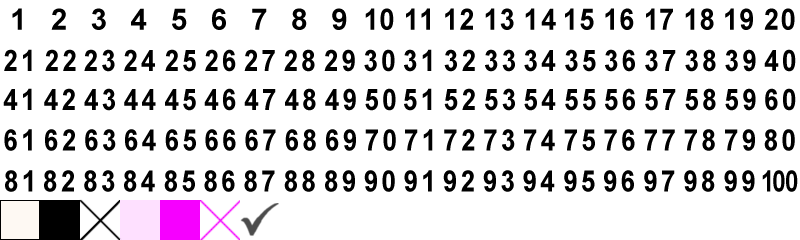
<style>
.page{position:relative;width:800px;height:240px;background:#ffffff}
.page>*{position:absolute;margin:0}
.t1{font:29.6px "Arial-BoldMT";letter-spacing:0.8em;color:#000000}
.t2{font:29.5px "Arial-BoldMT";letter-spacing:0.12em;color:#000000;scale:0.91 1}
.t3{font:29.5px "Arial-BoldMT";letter-spacing:0.12em;color:#000000;scale:0.89 1}
.t4{font:29.5px "Arial-BoldMT";letter-spacing:0.12em;color:#000000;scale:0.81 1}
.t5{font:29.5px "Arial-BoldMT";letter-spacing:-0.14em;color:#000000;scale:0.81 1}
</style>
<div class="page">
<p class="t1" style="left:12px;top:8px;width:335px;height:22px">123456789</p>
<p class="t2" style="left:365px;top:8px;width:430px;height:22px">1011 121314151617181920</p>
<p class="t3" style="left:4px;top:49px;width:391px;height:23px">21 222324252627282930</p>
<p class="t3" style="left:404px;top:49px;width:392px;height:23px">31 323334353637383940</p>
<p class="t3" style="left:3px;top:88px;width:393px;height:23px">41 424344454647484950</p>
<p class="t3" style="left:404px;top:88px;width:392px;height:23px">51 525354555657585960</p>
<p class="t3" style="left:4px;top:129px;width:392px;height:22px">61 626364656667686970</p>
<p class="t3" style="left:405px;top:129px;width:390px;height:22px">71727374757677787980</p>
<p class="t3" style="left:5px;top:170px;width:390px;height:22px">81828384858687888990</p>
<p class="t3" style="left:404px;top:170px;width:351px;height:22px">919293949596979899</p>
<p class="t4" style="left:762px;top:170px;width:36px;height:22px"><span class="t5"> </span>100</p>
</div>
